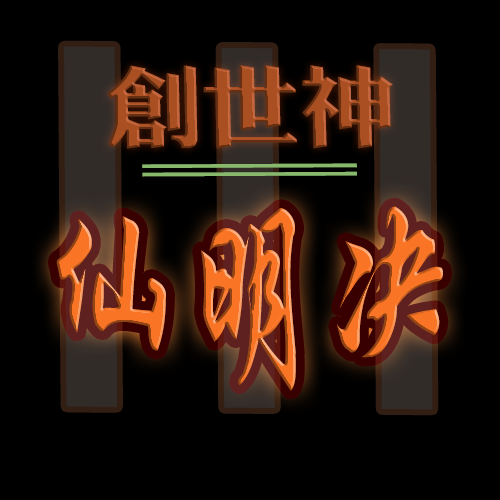
<style>
.page{position:relative;width:500px;height:500px;background:#000000}
.page>*{position:absolute;margin:0}
.t1{font:500.7px "STXihei";scale:1.39 1}
.t2{font:89.3px "¾­µä´Ö·ÂºÚ Regular";scale:1.09 1}
.t3{font:62.5px "¾­µä´Ö·ÂºÚ Regular";color:#88b86c;scale:7.84 1}
.t4{font:137.9px "JQXingKaiJT";color:#f97525}
</style>
<div class="page">
<p class="t1" style="left:64px;top:46px;width:369px;height:364px">III</p>
<p class="t2" style="left:107px;top:65px;width:286px;height:84px">创世神</p>
<p class="t3" style="left:142px;top:163px;width:215px;height:14px">=</p>
<p class="t4" style="left:56px;top:206px;width:387px;height:185px">仙明决</p>
</div>
